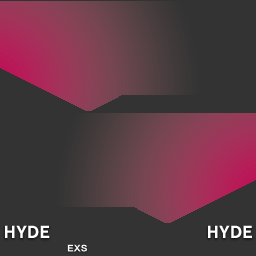
<style>
.page{position:relative;width:256px;height:256px;background:#333333}
.page>*{position:absolute;margin:0}
.t1{font:16.7px "FOT-Cezanne-Pro-B";letter-spacing:0.02em;color:#ffffff}
.t2{font:8.5px "NewCezannePro-B";letter-spacing:0.02em;color:#ffffff}
</style>
<div class="page">
<p class="t1" style="left:5px;top:225px;width:45px;height:13px">HYDE</p>
<p class="t1" style="left:208px;top:225px;width:44px;height:13px">HYDE</p>
<p class="t2" style="left:67px;top:244px;width:20px;height:8px">EXS</p>
</div>
